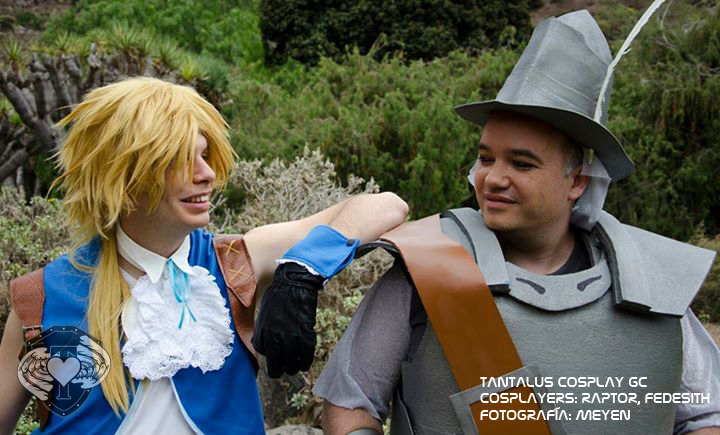
<style>
.page{position:relative;width:720px;height:435px}
.page>*{position:absolute;margin:0}
.t1{font:14px "NasalizationRg-Regular";color:#ffffff}
</style>
<div class="page">
<p class="t1" style="left:480px;top:377px;width:230px;height:43px">TANTALUS COSPLAY GC<br>COSPLAYERS: RAPTOR, FEDESITH<br>FOTOGRAFÍA: MEYEN</p>
</div>
